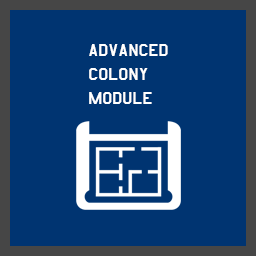
<style>
.page{position:relative;width:256px;height:256px;background:#003471}
.page>*{position:absolute;margin:0}
.t1{font:20.1px "AmarilloUSAF";color:#ffffff}
</style>
<div class="page">
<p class="t1" style="left:89px;top:44px;width:79px;height:60px">advanced<br>colony<br>module</p>
</div>
